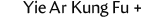
<style>
.page{position:relative;width:166px;height:18px;background:#ffffff}
.page>*{position:absolute;margin:0}
.t1{font:17.3px "Amira-Roman";color:#000000}
</style>
<div class="page">
<p class="t1" style="left:23px;top:0px;width:118px;height:17px;opacity:0.96">Yie Ar Kung Fu +</p>
</div>
